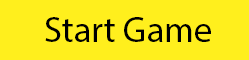
<style>
.page{position:relative;width:249px;height:60px;background:#ffef1d}
.page>*{position:absolute;margin:0}
.t1{font:36px "MyriadPro-Regular";color:#000000}
</style>
<div class="page">
<p class="t1" style="left:45px;top:17px;width:166px;height:25px">Start Game</p>
</div>
